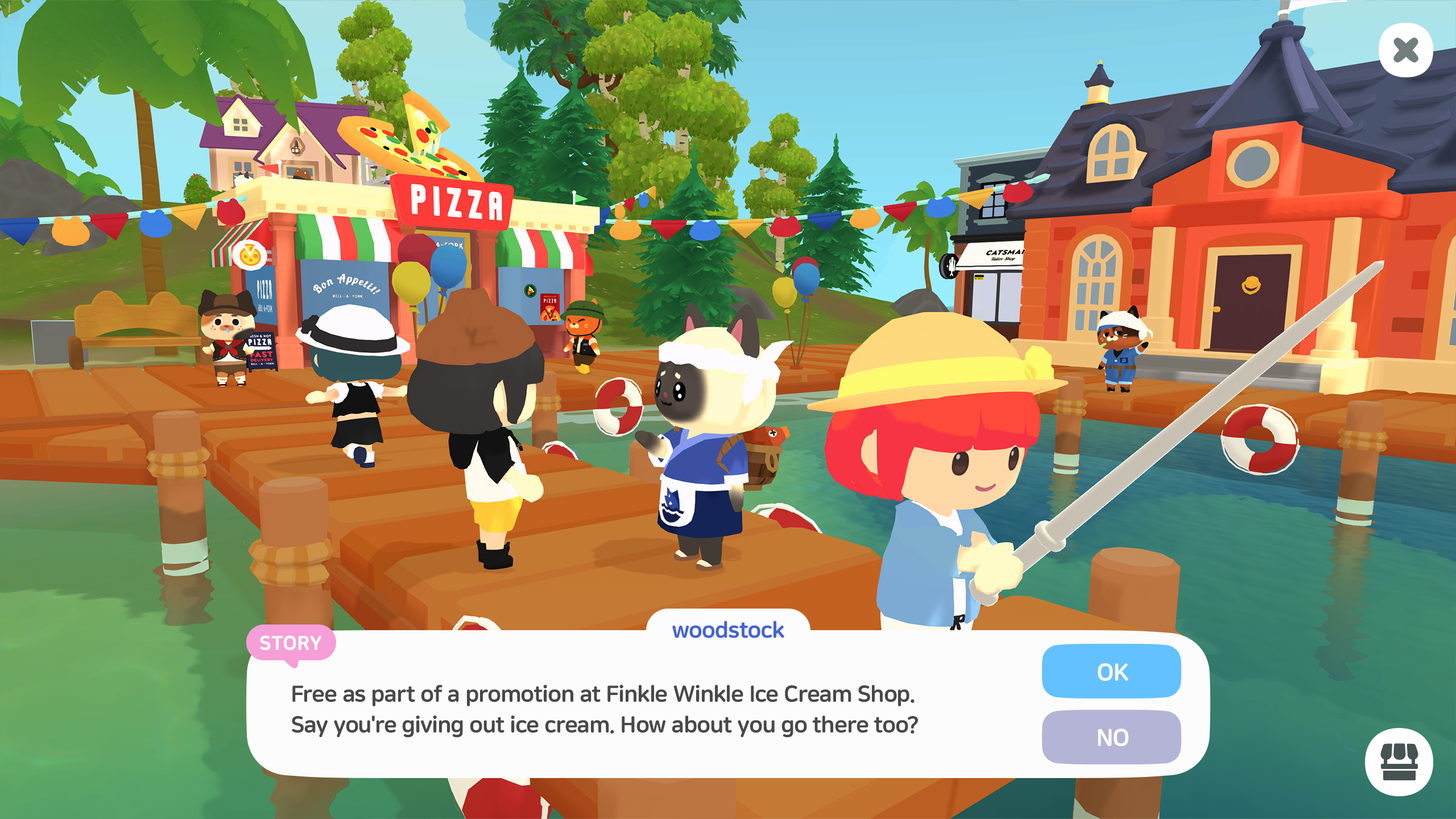
<style>
.page{position:relative;width:1456px;height:819px}
.page>*{position:absolute;margin:0}
.t1{font:22.7px "NanumSquareRoundOTFEB";letter-spacing:-0.02em;color:#4463d7}
.t2{font:19.3px "NanumSquareRoundOTFEB";color:#ffffff;text-transform:uppercase;font-weight:bold}
.t3{font:23.9px "NanumSquareRoundOTFEB";letter-spacing:-0.02em;color:#ffffff}
.t4{font:22.7px/30.7px "NanumSquareRoundOTFEB";letter-spacing:-0.02em;color:#484848}
</style>
<div class="page">
<p class="t1" style="left:672px;top:620px;width:112px;height:18px">woodstock</p>
<p class="t2" style="left:260px;top:635px;width:62px;height:15px">Story</p>
<p class="t3" style="left:1098px;top:663px;width:30px;height:18px">OK</p>
<p class="t4" style="left:292px;top:685px;width:626px;height:53px">Free as part of a promotion at Finkle Winkle Ice Cream Shop.<br>Say you're giving out ice cream. How about you go there too?</p>
<p class="t3" style="left:1098px;top:729px;width:30px;height:17px">NO</p>
</div>
